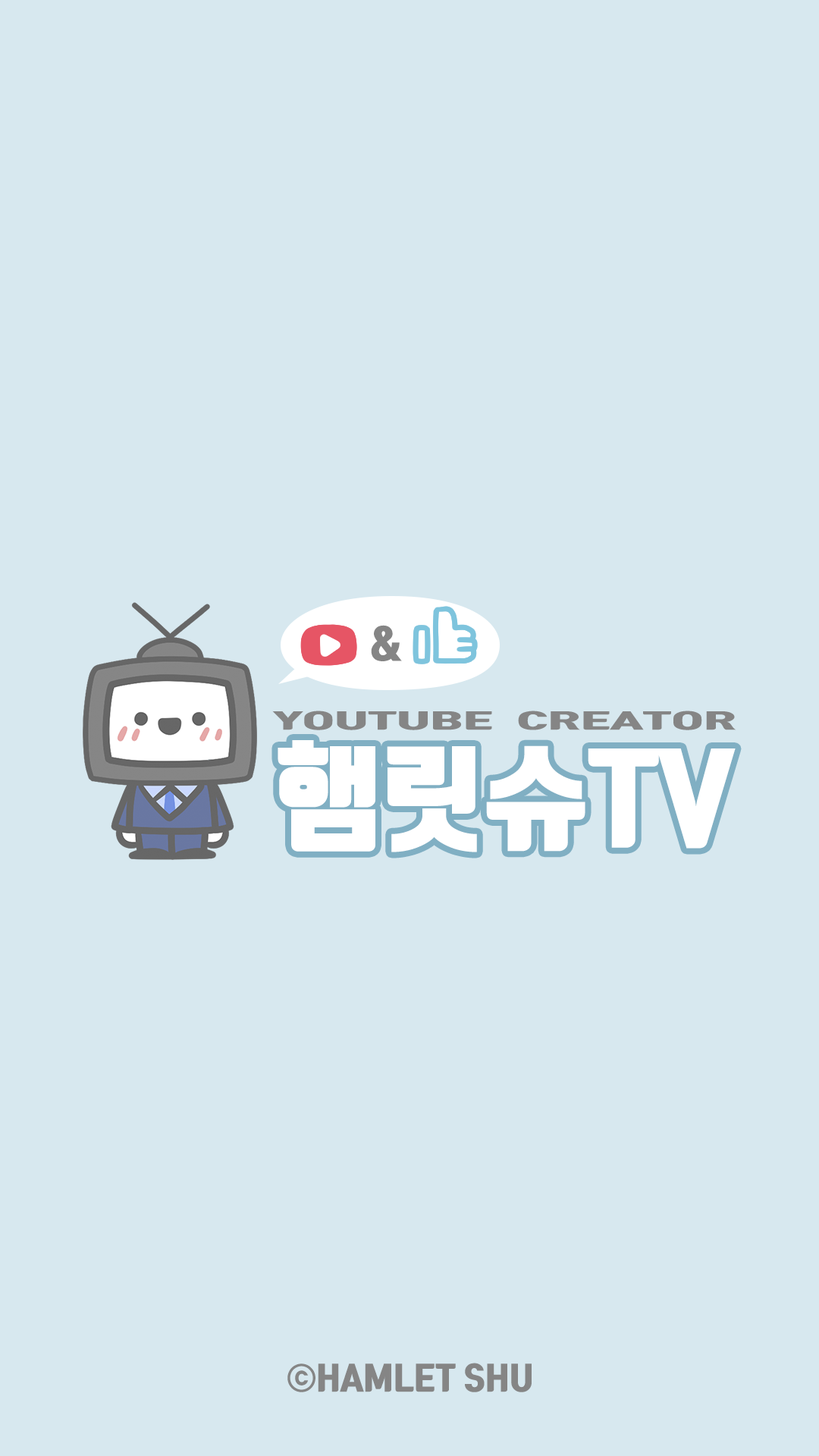
<style>
.page{position:relative;width:819px;height:1456px;background:#d7e8ef}
.page>*{position:absolute;margin:0}
.t1{font:40.6px "TmonMonsoriOTFBlack";color:#858585}
.t2{font:21.3px "TmonMonsoriOTFBlack";color:#858585;scale:2.14 1}
.t3{font:114.3px "TmonMonsoriOTFBlack";color:#ffffff}
.t4{font:32.3px "TmonMonsoriOTFBlack";color:#858585}
</style>
<div class="page">
<p class="t1" style="left:371px;top:625px;width:31px;height:36px">&amp;</p>
<p class="t2" style="left:272px;top:711px;width:464px;height:19px">YOUTUBE  CREATOR</p>
<p class="t3" style="left:278px;top:740px;width:458px;height:112px">햄릿슈TV</p>
<p class="t4" style="left:287px;top:1363px;width:245px;height:29px">ⓒHAMLET SHU</p>
</div>
